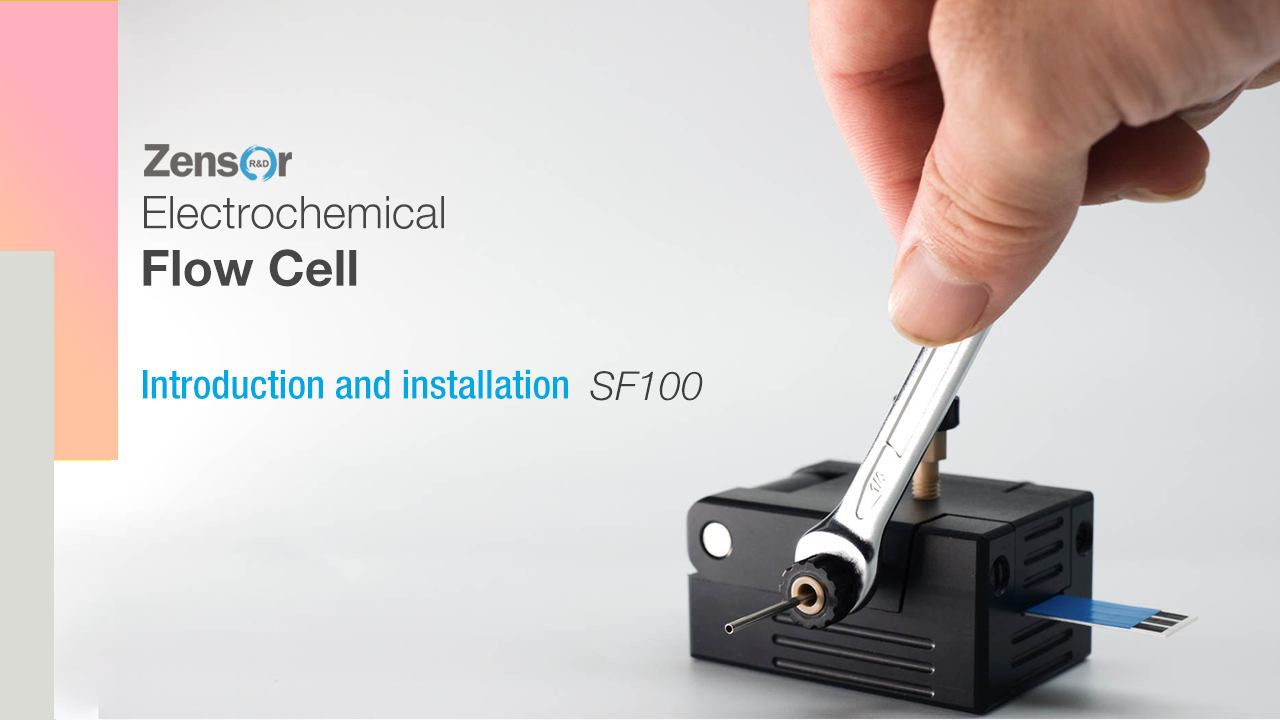
<style>
.page{position:relative;width:1280px;height:720px}
.page>*{position:absolute;margin:0}
.t1{font:45px "HelveticaNeueLTPro-Lt";color:#464646}
.t2{font:50px "HelveticaNeueLTPro-Bd";color:#464646}
.t3{font:40px "HelveticaNeueLTPro-MdCn";color:#00a7e1}
.t4{font:40px "HelveticaNeueLTPro-LtIt";color:#3d3d3d}
</style>
<div class="page">
<p class="t1" style="left:144px;top:196px;width:300px;height:33px">Electrochemical</p>
<p class="t2" style="left:143px;top:249px;width:214px;height:38px">Flow Cell</p>
<p class="t3" style="left:143px;top:369px;width:425px;height:30px">Introduction and installation</p>
<p class="t4" style="left:590px;top:371px;width:113px;height:30px">SF100</p>
</div>
